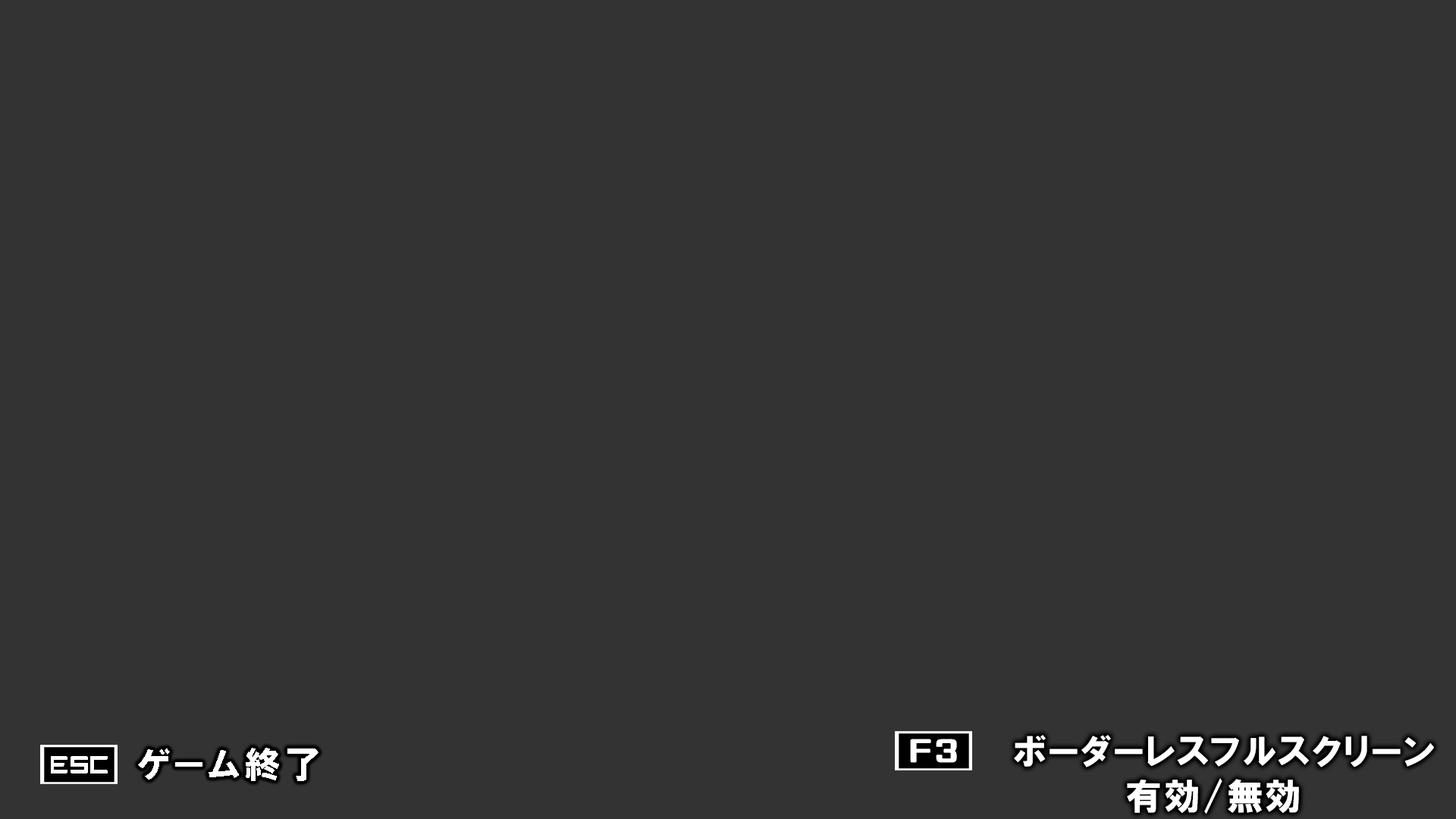
<style>
.page{position:relative;width:1456px;height:819px;background:#333333}
.page>*{position:absolute;margin:0}
.t1{font:36.4px "HGPSoeiKakugothicUB";letter-spacing:0.05em;color:#ffffff}
</style>
<div class="page">
<p class="t1" style="left:1014px;top:735px;width:420px;height:32px">ボーダーレスフルスクリーン</p>
<p class="t1" style="left:1127px;top:778px;width:172px;height:36px">有効/無効</p>
</div>
